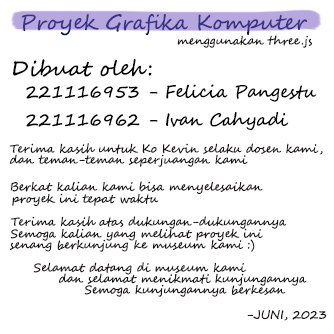
<style>
.page{position:relative;width:334px;height:334px;background:#ffffff}
.page>*{position:absolute;margin:0}
.t1{font:20.8px "SegoeScript";color:#373385}
.t2{font:11.8px "SegoeScript";color:#181314}
.t3{font:20.8px "SegoeScript";color:#000000}
.t4{font:17.4px "SegoeScript";color:#000000}
</style>
<div class="page">
<p class="t1" style="left:21px;top:14px;width:286px;height:22px">Proyek Grafika Komputer</p>
<p class="t2" style="left:177px;top:35px;width:135px;height:13px">menggunakan three.js</p>
<p class="t3" style="left:13px;top:58px;width:139px;height:19px">Dibuat oleh:</p>
<p class="t4" style="left:26px;top:84px;width:291px;height:18px">221116953 - Felicia Pangestu</p>
<p class="t4" style="left:26px;top:112px;width:263px;height:18px">221116962 - Ivan Cahyadi</p>
<p class="t2" style="left:9px;top:143px;width:314px;height:12px">Terima kasih untuk Ko Kevin selaku dosen kami,</p>
<p class="t2" style="left:10px;top:154px;width:238px;height:13px">dan teman-teman seperjuangan kami</p>
<p class="t2" style="left:10px;top:181px;width:253px;height:13px">Berkat kalian kami bisa menyelesaikan</p>
<p class="t2" style="left:12px;top:193px;width:147px;height:13px">proyek ini tepat waktu</p>
<p class="t2" style="left:10px;top:216px;width:277px;height:13px">Terima kasih atas dukungan-dukungannya</p>
<p class="t2" style="left:10px;top:228px;width:253px;height:13px">Semoga kalian yang melihat proyek ini</p>
<p class="t2" style="left:9px;top:239px;width:246px;height:13px">senang berkunjung ke museum kami :)</p>
<p class="t2" style="left:33px;top:262px;width:213px;height:13px">Selamat datang di museum kami</p>
<p class="t2" style="left:59px;top:273px;width:248px;height:13px">dan selamat menikmati kunjungannya</p>
<p class="t2" style="left:84px;top:284px;width:202px;height:13px">Semoga kunjungannya berkesan</p>
<p class="t2" style="left:247px;top:310px;width:80px;height:11px">-JUNI, 2023</p>
</div>
